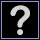
<style>
.page{position:relative;width:40px;height:40px;background:#000000}
.page>*{position:absolute;margin:0}
.t1{font:40px "ArialRoundedMTBold";color:#d3d3d3;font-variant:small-caps}
</style>
<div class="page">
<p class="t1" style="left:10px;top:5px;width:20px;height:30px">?</p>
</div>
